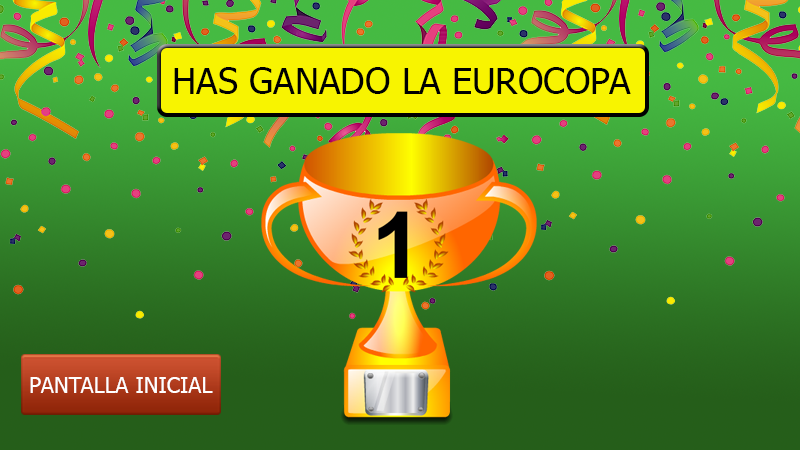
<style>
.page{position:relative;width:800px;height:450px}
.page>*{position:absolute;margin:0}
.t1{font:36px "Tahoma";color:#000000}
.t2{font:22px "Tahoma";color:#ffffff}
</style>
<div class="page">
<p class="t1" style="left:174px;top:67px;width:457px;height:27px">HAS GANADO LA EUROCOPA</p>
<p class="t2" style="left:30px;top:377px;width:183px;height:16px">PANTALLA INICIAL</p>
</div>
